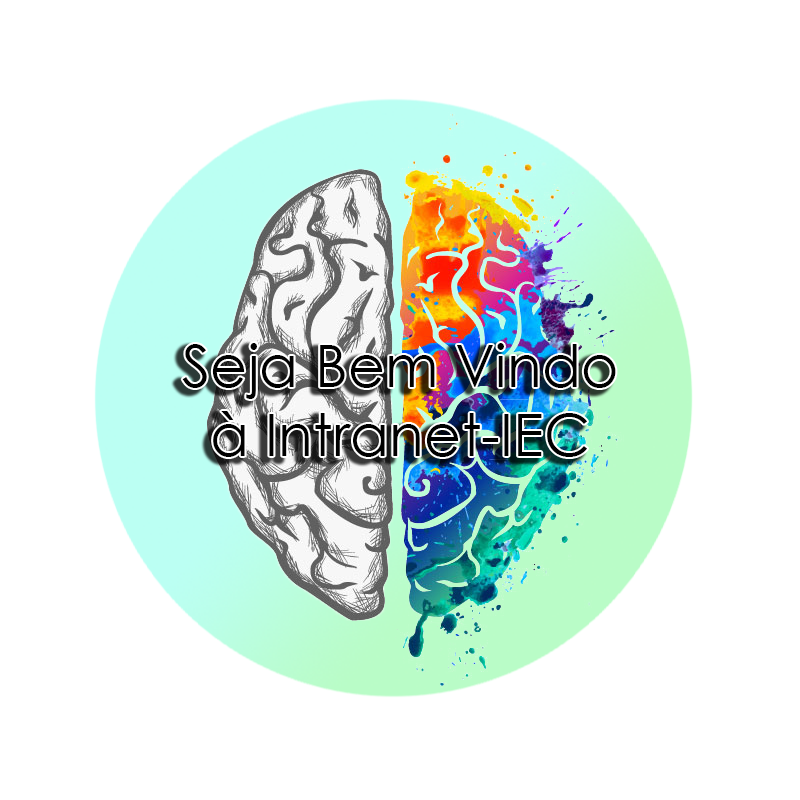
<style>
.page{position:relative;width:800px;height:800px;background:#ffffff}
.page>*{position:absolute;margin:0}
.t1{font:57.9px "CenturyGothic";color:#000000}
</style>
<div class="page">
<p class="t1" style="left:182px;top:343px;width:434px;height:114px;text-align:center">Seja Bem Vindo<br>à Intranet-IEC</p>
</div>
